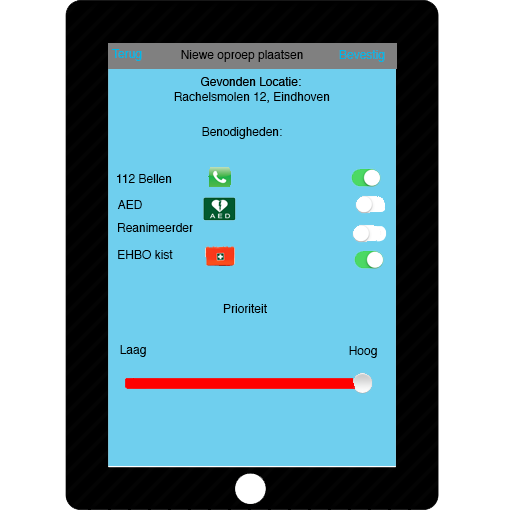
<style>
.page{position:relative;width:512px;height:512px;background:#6fcfee}
.page>*{position:absolute;margin:0}
.t1{font:12px "Helvetica";color:#00b7e7}
.t2{font:12px "Helvetica";color:#000000}
</style>
<div class="page">
<p class="t1" style="left:112px;top:49px;width:30px;height:12px">Terug</p>
<p class="t2" style="left:181px;top:50px;width:122px;height:12px">Niewe oproep plaatsen</p>
<p class="t1" style="left:339px;top:50px;width:46px;height:12px">Bevestig</p>
<p class="t2" style="left:174px;top:92px;width:156px;height:11px">Rachelsmolen 12, Eindhoven</p>
<p class="t2" style="left:202px;top:127px;width:80px;height:12px">Benodigheden:</p>
<p class="t2" style="left:117px;top:174px;width:55px;height:9px">112 Bellen</p>
<p class="t2" style="left:117px;top:200px;width:25px;height:9px">AED</p>
<p class="t2" style="left:118px;top:223px;width:75px;height:9px">Reanimeerder</p>
<p class="t2" style="left:118px;top:250px;width:55px;height:9px">EHBO kist</p>
<p class="t2" style="left:223px;top:304px;width:44px;height:9px">Prioriteit</p>
<p class="t2" style="left:120px;top:345px;width:26px;height:12px">Laag</p>
<p class="t2" style="left:349px;top:346px;width:28px;height:12px">Hoog</p>
</div>
